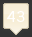
<style>
.page{position:relative;width:32px;height:37px}
.page>*{position:absolute;margin:0}
.t1{font:15px "NewsGothicBT-Roman";color:#ffffff}
</style>
<div class="page">
<p class="t1" style="left:7px;top:11px;width:18px;height:11px">43</p>
</div>
